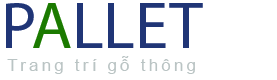
<style>
.page{position:relative;width:277px;height:80px;background:#ffffff}
.page>*{position:absolute;margin:0}
.t1{font:66.7px "MyriadHebrew-Regular";color:#203577}
.t2{font:66.7px "MyriadHebrew-Regular";color:#1b7a00}
.t3{font:16.7px "ArialMT";letter-spacing:0.2em;color:#bac4c4}
</style>
<div class="page">
<p class="t1" style="left:6px;top:3px;width:197px;height:45px">P<span class="t2">A</span>LLET</p>
<p class="t3" style="left:7px;top:56px;width:188px;height:18px">Trang trí gỗ thông</p>
</div>
